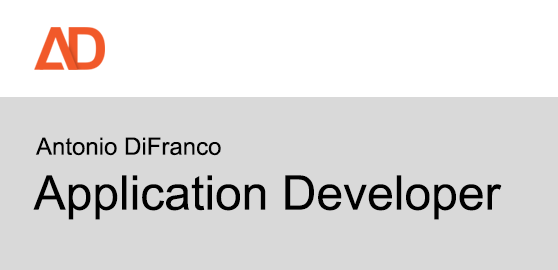
<style>
.page{position:relative;width:558px;height:270px;background:#d9d9d9}
.page>*{position:absolute;margin:0}
.t1{font:24px "ArialMT";color:#000000}
.t2{font:48px "ArialMT";color:#000000}
</style>
<div class="page">
<p class="t1" style="left:35px;top:137px;width:186px;height:19px">Antonio DiFranco</p>
<p class="t2" style="left:33px;top:175px;width:469px;height:45px">Application Developer</p>
</div>
